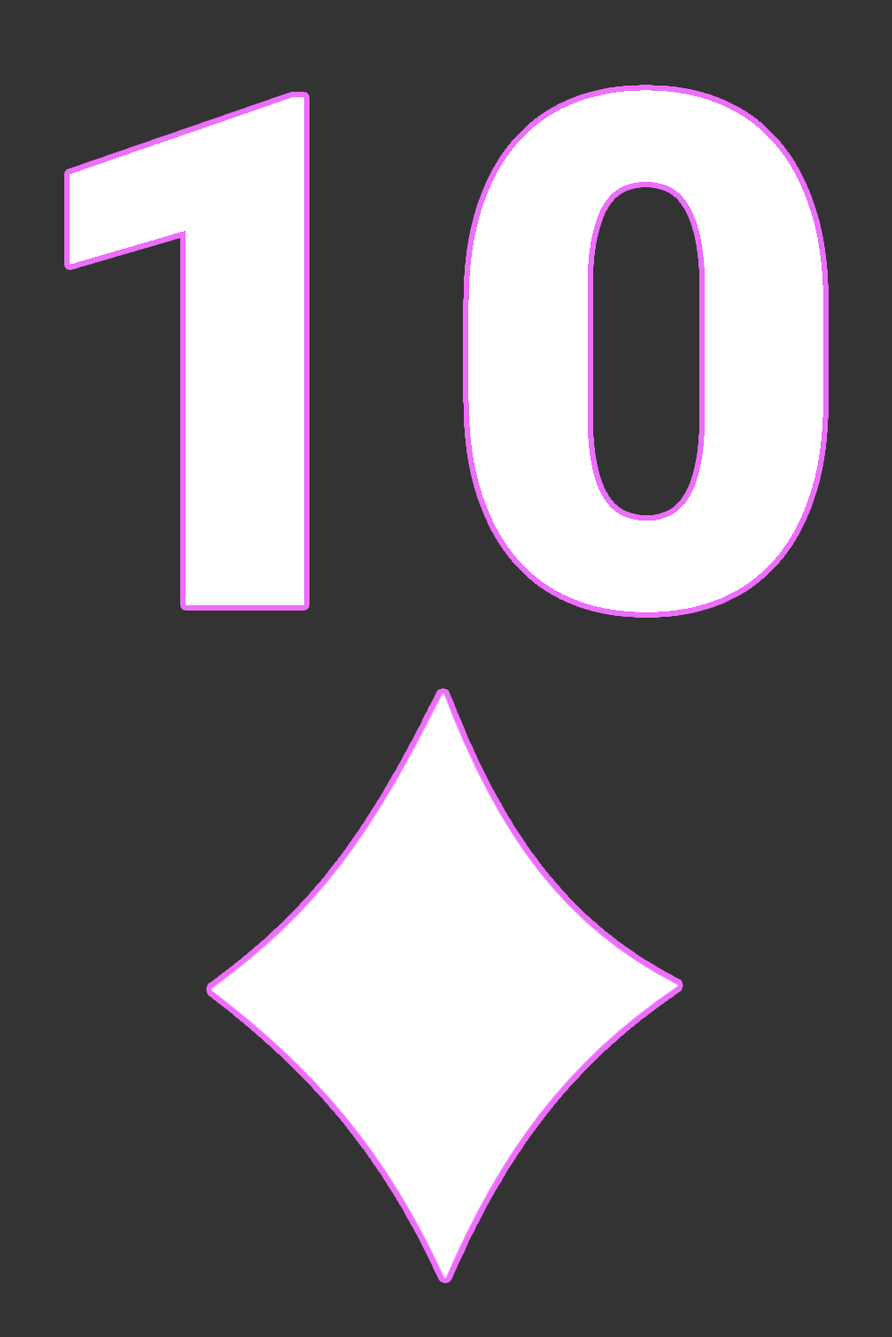
<style>
.page{position:relative;width:892px;height:1337px;background:#333333}
.page>*{position:absolute;margin:0}
.t1{font:713.3px "Roboto-Black";letter-spacing:0.02em;color:#ffffff}
</style>
<div class="page">
<p class="t1" style="left:70px;top:90px;width:753px;height:523px">10</p>
</div>
